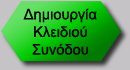
<style>
.page{position:relative;width:130px;height:70px}
.page>*{position:absolute;margin:0}
.t1{font:14.7px "ArialMT";color:#000000}
</style>
<div class="page">
<p class="t1" style="left:23px;top:8px;width:74px;height:47px;text-align:center">Δημιουργία<br>Κλειδιού<br>Συνόδου</p>
</div>
